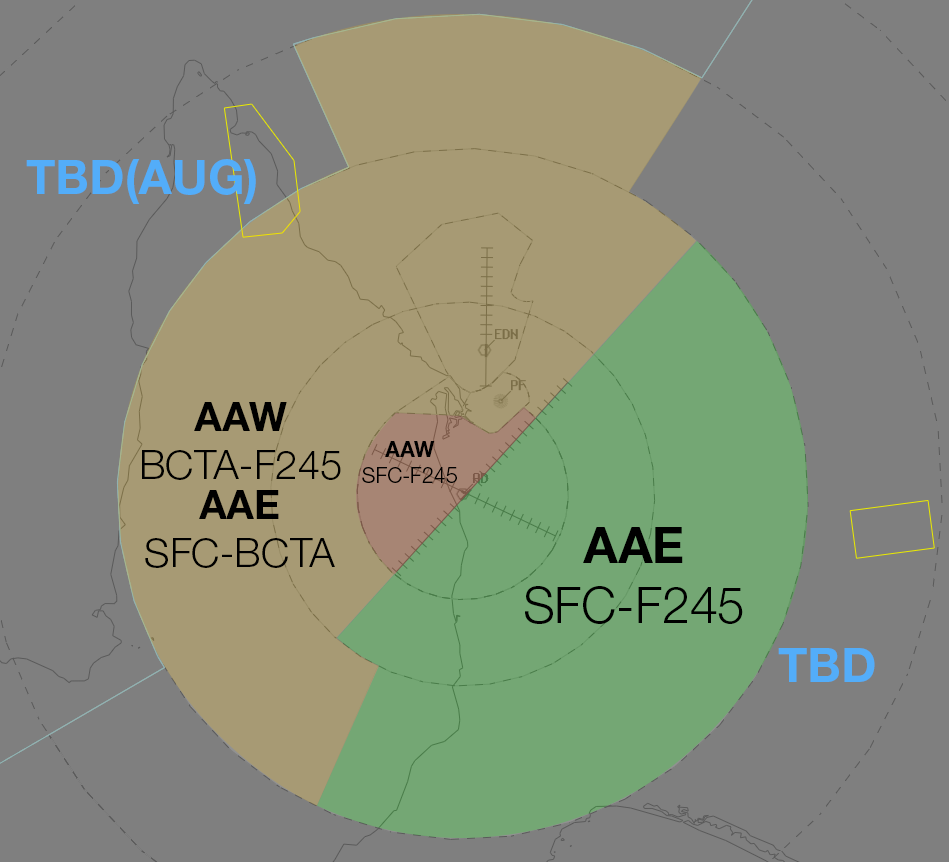
<style>
.page{position:relative;width:949px;height:862px;background:#7f7f7f}
.page>*{position:absolute;margin:0}
.t1{font:48.2px "HelveticaNeueLTStd-Bd";color:#53adf9}
.t2{font:40.2px "HelveticaNeueLTStd-Lt";color:#000000}
.t3{font:40.2px "HelveticaNeueLTStd-Bd";color:#000000}
.t4{font:21.5px "HelveticaNeueLTStd-Lt";color:#000000}
.t5{font:21.5px "HelveticaNeueLTStd-Bd";color:#000000}
.t6{font:50.1px "HelveticaNeueLTStd-Lt";color:#000000}
.t7{font:50.1px "HelveticaNeueLTStd-Bd";color:#000000}
</style>
<div class="page">
<p class="t1" style="left:26px;top:159px;width:230px;height:45px">TBD(AUG)</p>
<p class="t2" style="left:142px;top:402px;width:199px;height:78px;text-align:center"><span class="t3">AAW<br></span>BCTA-F245</p>
<p class="t4" style="left:362px;top:441px;width:95px;height:42px;text-align:center"><span class="t5">AAW<br></span>SFC-F245</p>
<p class="t2" style="left:145px;top:490px;width:190px;height:78px;text-align:center"><span class="t3">AAE<br></span>SFC-BCTA</p>
<p class="t6" style="left:525px;top:527px;width:218px;height:97px;text-align:center"><span class="t7">AAE<br></span>SFC-F245</p>
<p class="t1" style="left:778px;top:648px;width:97px;height:34px">TBD</p>
</div>
